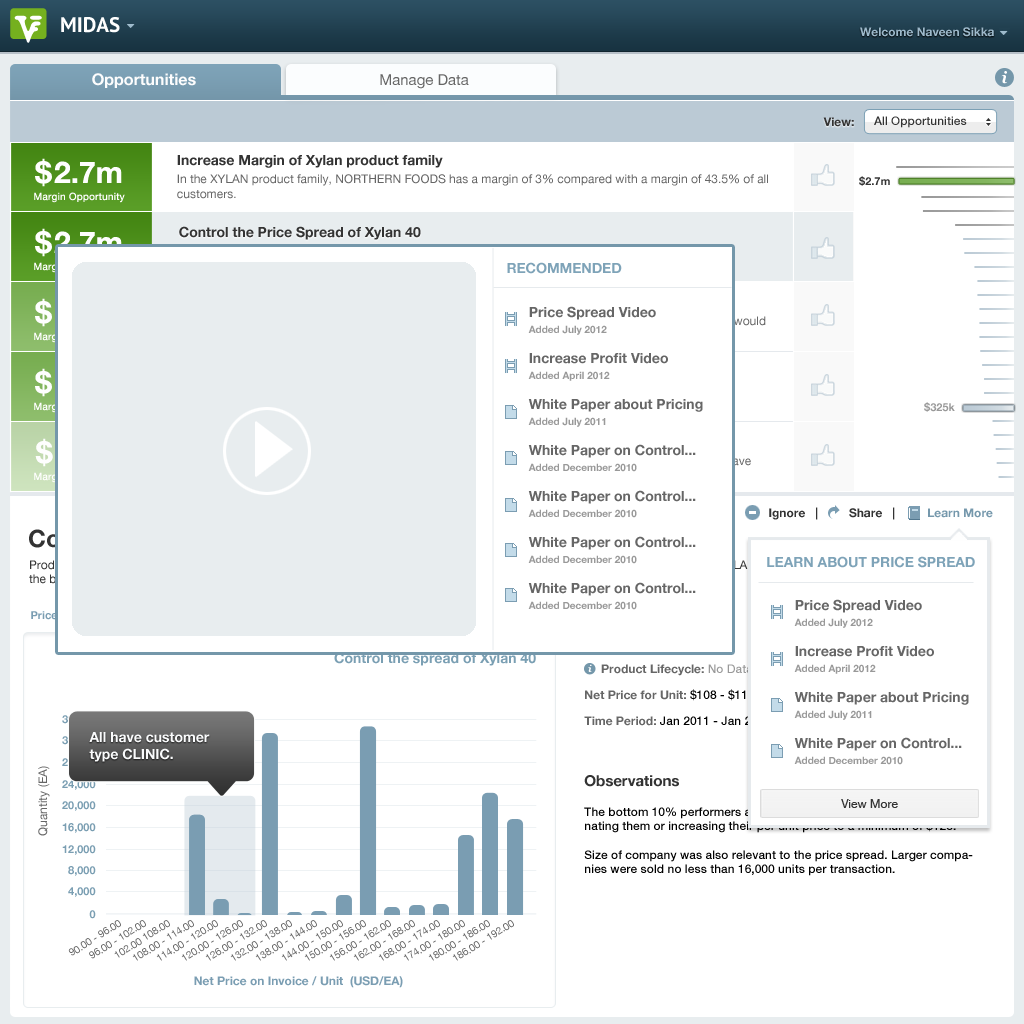
<style>
.page{position:relative;width:1024px;height:1024px;background:#ffffff}
.page>*{position:absolute;margin:0}
.t1{font:21px "PTSans-Bold";color:#ffffff}
.t2{font:12px "HelveticaNeue-Bold";color:#9db9cb}
.t3{font:16px "HelveticaNeue-Bold";color:#fdfdfd}
.t4{font:15px "HelveticaNeue";color:#666666}
.t5{font:16px "Georgia-BoldItalic";letter-spacing:0.025em;color:#ffffff}
.t6{font:12px "HelveticaNeue-Bold";color:#333333}
.t7{font:12px "HelveticaNeue-Medium";color:#333333}
.t8{font:30px "HelveticaNeue-Bold";color:#fefefe}
.t9{font:30px "HelveticaNeue-Bold";letter-spacing:0.075em;color:#fefefe}
.t10{font:12px "HelveticaNeue";color:#666666}
.t11{font:14px "HelveticaNeue-Bold";color:#333333}
.t12{font:11px "HelveticaNeue-Bold";color:#333333}
.t13{font:10px "HelveticaNeue";letter-spacing:0.025em;color:#fefefe}
.t14{font:12px "HelveticaNeue"}
.t15{font:14px "HelveticaNeue-Bold"}
.t16{font:14px "HelveticaNeue-Bold";color:#7ea3b8}
.t17{font:14px/30px "HelveticaNeue-Bold";color:#666666}
.t18{font:14px/16px "HelveticaNeue-Bold";color:#666666}
.t19{font:10px/16px "HelveticaNeue-Bold";color:#999999}
.t20{font:11px "HelveticaNeue-Bold";color:#999999}
.t21{font:12px "HelveticaNeue-Bold";color:#7598ac}
.t22{font:12px/26px "HelveticaNeue-Bold";color:#666666}
.t23{font:12px/26px "HelveticaNeue-Medium";color:#000000}
.t24{font:12px/26px "HelveticaNeue-Medium";color:#999999}
.t25{font:14px "HelveticaNeue-Bold";color:#7a9fb3}
.t26{font:9.7px "Georgia-BoldItalic";letter-spacing:0.025em;color:#ffffff}
.t27{font:14px/17px "HelveticaNeue-Bold";color:#fafbfc}
.t28{font:11px "HelveticaNeue-Bold";color:#7a9eb2}
.t29{font:15px "HelveticaNeue-Bold";color:#333333}
.t30{font:12px "HelveticaNeue-Medium";color:#000000}
.t31{font:12px "HelveticaNeue";letter-spacing:0.005em;color:#333333}
.t32{font:10px "HelveticaNeue";color:#666666}
.t33{font:12px "HelveticaNeue-Bold";color:#7a9db2}
</style>
<div class="page">
<p class="t1" style="left:61px;top:17px;width:59px;height:16px">MIDAS</p>
<p class="t2" style="left:860px;top:27px;width:134px;height:10px">Welcome Naveen Sikka</p>
<p class="t3" style="left:92px;top:73px;width:104px;height:15px">Opportunities</p>
<p class="t4" style="left:380px;top:74px;width:89px;height:15px">Manage Data</p>
<p class="t5" style="left:1001px;top:71px;width:6px;height:13px">i</p>
<p class="t6" style="left:823px;top:117px;width:31px;height:10px">View:</p>
<p class="t7" style="left:874px;top:116px;width:93px;height:12px">All Opportunities</p>
<p class="t8" style="left:35px;top:158px;width:87px;height:29px"><span class="t9">$</span>2.7m</p>
<p class="t10" style="left:177px;top:155px;width:591px;height:44px"><span class="t11">Increase Margin of Xylan product family<br></span>In the XYLAN product family, NORTHERN FOODS has a margin of 3% compared with a margin of 43.5% of all<br>customers.</p>
<p class="t12" style="left:859px;top:176px;width:31px;height:10px">$2.7m</p>
<p class="t13" style="left:34px;top:192px;width:91px;height:11px">Margin Opportunity</p>
<p class="t8" style="left:35px;top:228px;width:87px;height:29px"><span class="t9">$</span>2.7m</p>
<p class="t14" style="left:179px;top:226px;width:510px;height:47px"><span class="t15">Control the Price Spread of Xylan 40<br></span>Product XYLAN 40 has a high price variation. By removing the bottom 10% you would increase <br>revenue by $2,660,890.</p>
<p class="t16" style="left:507px;top:262px;width:115px;height:12px">RECOMMENDED</p>
<p class="t17" style="left:528px;top:306px;width:175px;height:304px"><span class="t18">Price Spread Video<br></span><span class="t19">Added July 2012<br></span>Increase Profit Video<br><span class="t19">Added April 2012<br></span>White Paper about Pricing<br><span class="t19">Added July 2011<br></span>White Paper on Control...<br><span class="t19">Added December 2010<br></span>White Paper on Control...<br><span class="t19">Added December 2010<br></span>White Paper on Control...<br><span class="t19">Added December 2010<br></span>White Paper on Control...<br><span class="t19">Added December 2010</span></p>
<p class="t20" style="left:924px;top:402px;width:31px;height:10px">$325k</p>
<p class="t6" style="left:769px;top:507px;width:49px;height:13px">Ignore   |</p>
<p class="t6" style="left:849px;top:507px;width:46px;height:13px">Share   |</p>
<p class="t21" style="left:928px;top:508px;width:65px;height:10px">Learn More</p>
<p class="t16" style="left:767px;top:556px;width:208px;height:12px">LEARN ABOUT PRICE SPREAD</p>
<p class="t17" style="left:794px;top:599px;width:175px;height:166px"><span class="t18">Price Spread Video<br></span><span class="t19">Added July 2012<br></span>Increase Profit Video<br><span class="t19">Added April 2012<br></span>White Paper about Pricing<br><span class="t19">Added July 2011<br></span>White Paper on Control...<br><span class="t19">Added December 2010</span></p>
<p class="t22" style="left:584px;top:637px;width:221px;height:89px">Revenue: <span class="t23">$31,415,466<br></span>     Product Lifecycle: <span class="t24">No Data Provided<br></span>Net Price for Unit: <span class="t23">$108 - $114<br></span>Time Period: <span class="t23">Jan 2011 - Jan 2012</span></p>
<p class="t25" style="left:334px;top:652px;width:202px;height:14px">Control the spread of Xylan 40</p>
<p class="t26" style="left:588px;top:664px;width:4px;height:8px">i</p>
<p class="t27" style="left:89px;top:732px;width:121px;height:30px">All have customer<br>type CLINIC.</p>
<p class="t10" style="left:38px;top:766px;width:12px;height:70px;rotate:-90deg">Quantity (EA)</p>
<p class="t28" style="left:62px;top:780px;width:34px;height:10px">24,000</p>
<p class="t29" style="left:584px;top:775px;width:95px;height:12px">Observations</p>
<p class="t28" style="left:62px;top:801px;width:34px;height:10px">20,000</p>
<p class="t30" style="left:584px;top:807px;width:389px;height:69px">The bottom 10% performers all have customer type CLINIC. Try eliminating them or increasing their per unit price to a minimum of $125.<br><br>Size of company was also relevant to the price spread. Larger companies were sold no less than 16,000 units per transaction.</p>
<p class="t31" style="left:841px;top:799px;width:57px;height:9px">View More</p>
<p class="t28" style="left:62px;top:823px;width:34px;height:10px">16,000</p>
<p class="t28" style="left:62px;top:845px;width:34px;height:10px">12,000</p>
<p class="t28" style="left:68px;top:866px;width:28px;height:10px">8,000</p>
<p class="t28" style="left:68px;top:887px;width:28px;height:10px">4,000</p>
<p class="t28" style="left:89px;top:910px;width:7px;height:9px">0</p>
<p class="t32" style="left:68px;top:920px;width:53px;height:36px;rotate:-32deg">90.00 - 96.00</p>
<p class="t32" style="left:89px;top:920px;width:57px;height:39px;rotate:-32deg">96.00 - 102.00</p>
<p class="t32" style="left:114px;top:920px;width:56px;height:38px;rotate:-32deg">102.00 108.00</p>
<p class="t32" style="left:132px;top:920px;width:62px;height:41px;rotate:-32deg">108.00 - 114.00</p>
<p class="t32" style="left:156px;top:920px;width:62px;height:41px;rotate:-32deg">114.00 - 120.00</p>
<p class="t32" style="left:181px;top:920px;width:62px;height:41px;rotate:-32deg">120.00 - 126.00</p>
<p class="t32" style="left:205px;top:920px;width:62px;height:41px;rotate:-32deg">126.00 - 132.00</p>
<p class="t32" style="left:230px;top:920px;width:62px;height:41px;rotate:-32deg">132.00 - 138.00</p>
<p class="t32" style="left:255px;top:920px;width:62px;height:41px;rotate:-32deg">138.00 - 144.00</p>
<p class="t32" style="left:281px;top:920px;width:62px;height:41px;rotate:-32deg">144.00 - 150.00</p>
<p class="t32" style="left:304px;top:920px;width:62px;height:41px;rotate:-32deg">150.00 - 156.00</p>
<p class="t32" style="left:329px;top:920px;width:62px;height:41px;rotate:-32deg">156.00 - 162.00</p>
<p class="t32" style="left:353px;top:920px;width:62px;height:41px;rotate:-32deg">162.00 - 168.00</p>
<p class="t32" style="left:378px;top:920px;width:62px;height:41px;rotate:-32deg">168.00 - 174.00</p>
<p class="t32" style="left:403px;top:920px;width:62px;height:41px;rotate:-32deg">174.00 - 180.00</p>
<p class="t32" style="left:428px;top:920px;width:62px;height:41px;rotate:-32deg">180.00 - 186.00</p>
<p class="t32" style="left:452px;top:920px;width:62px;height:41px;rotate:-32deg">186.00 - 192.00</p>
<p class="t33" style="left:194px;top:976px;width:209px;height:12px">Net Price on Invoice / Unit  (USD/EA)</p>
</div>
